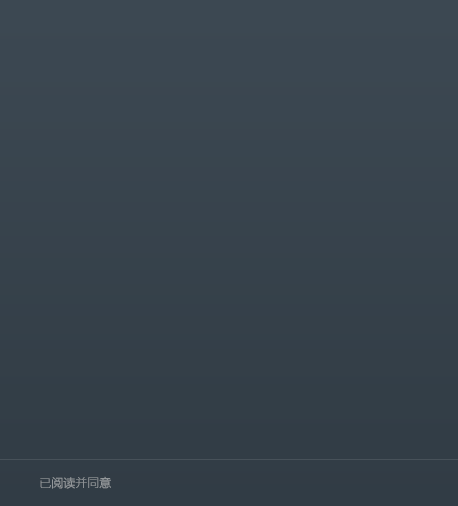
<style>
.page{position:relative;width:458px;height:506px}
.page>*{position:absolute;margin:0}
.t1{font:12px "MicrosoftYaHeiLight";color:#93979a}
</style>
<div class="page">
<p class="t1" style="left:40px;top:476px;width:71px;height:13px">已阅读并同意</p>
</div>
